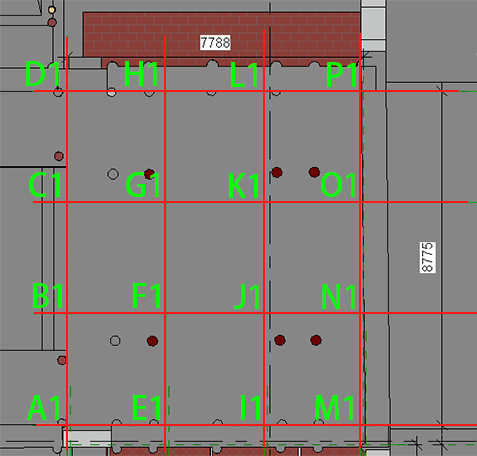
<style>
.page{position:relative;width:477px;height:456px;background:#868686}
.page>*{position:absolute;margin:0}
.t1{font:32px "AdobeFanHeitiStd-Bold";color:#06ff00}
</style>
<div class="page">
<p class="t1" style="left:26px;top:61px;width:33px;height:25px">D1</p>
<p class="t1" style="left:125px;top:61px;width:32px;height:25px">H1</p>
<p class="t1" style="left:231px;top:62px;width:26px;height:25px">L1</p>
<p class="t1" style="left:327px;top:62px;width:29px;height:25px">P1</p>
<p class="t1" style="left:29px;top:172px;width:31px;height:25px">C1</p>
<p class="t1" style="left:126px;top:172px;width:33px;height:25px">G1</p>
<p class="t1" style="left:229px;top:173px;width:29px;height:25px">K1</p>
<p class="t1" style="left:321px;top:172px;width:34px;height:25px">O1</p>
<p class="t1" style="left:33px;top:283px;width:29px;height:25px">B1</p>
<p class="t1" style="left:133px;top:283px;width:27px;height:25px">F1</p>
<p class="t1" style="left:234px;top:284px;width:25px;height:25px">J1</p>
<p class="t1" style="left:322px;top:284px;width:33px;height:25px">N1</p>
<p class="t1" style="left:27px;top:395px;width:32px;height:25px">A1</p>
<p class="t1" style="left:133px;top:395px;width:27px;height:25px">E1</p>
<p class="t1" style="left:241px;top:395px;width:19px;height:25px">I1</p>
<p class="t1" style="left:315px;top:395px;width:38px;height:25px">M1</p>
</div>
